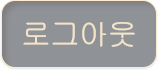
<style>
.page{position:relative;width:158px;height:70px;background:#8f9297}
.page>*{position:absolute;margin:0}
.t1{font:30px "Gulim";letter-spacing:-0.04em;color:#f6e4c8}
</style>
<div class="page">
<p class="t1" style="left:23px;top:22px;width:112px;height:25px">로그아웃</p>
</div>
